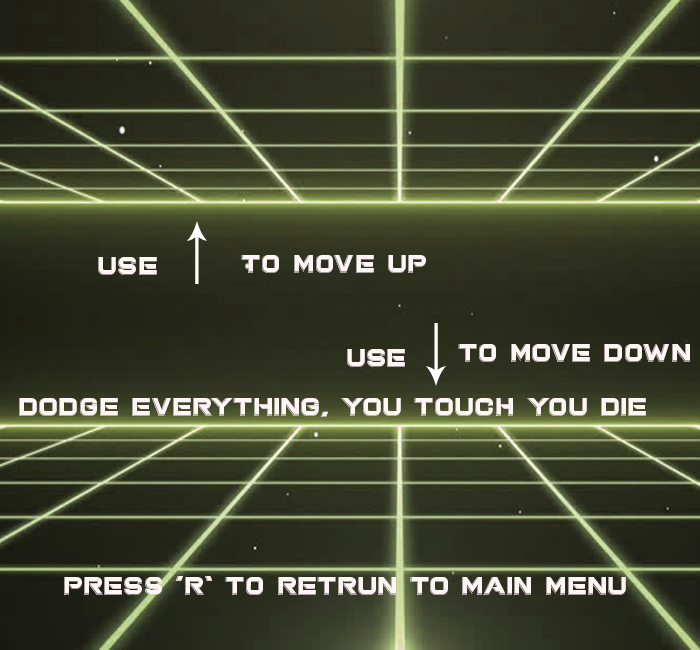
<style>
.page{position:relative;width:700px;height:650px}
.page>*{position:absolute;margin:0}
.t1{font:24px "SummitBold-Display";color:#fff5f5}
.t2{font:24.1px "SummitBold-Display";color:#fff5f5}
</style>
<div class="page">
<p class="t1" style="left:98px;top:257px;width:59px;height:18px">Use</p>
<p class="t1" style="left:241px;top:255px;width:185px;height:18px">to move up</p>
<p class="t1" style="left:347px;top:349px;width:58px;height:18px">Use</p>
<p class="t1" style="left:458px;top:344px;width:232px;height:18px">to move down</p>
<p class="t2" style="left:19px;top:398px;width:627px;height:19px">Dodge Everything, you touch you die</p>
<p class="t1" style="left:64px;top:576px;width:562px;height:19px">press ‘R’ to retrun to main menu</p>
</div>
